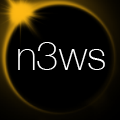
<style>
.page{position:relative;width:120px;height:120px;background:#000000}
.page>*{position:absolute;margin:0}
.t1{font:40px "HelveticaNeue-Thin";color:#ffffff}
</style>
<div class="page">
<p class="t1" style="left:18px;top:42px;width:87px;height:28px">n3ws</p>
</div>
